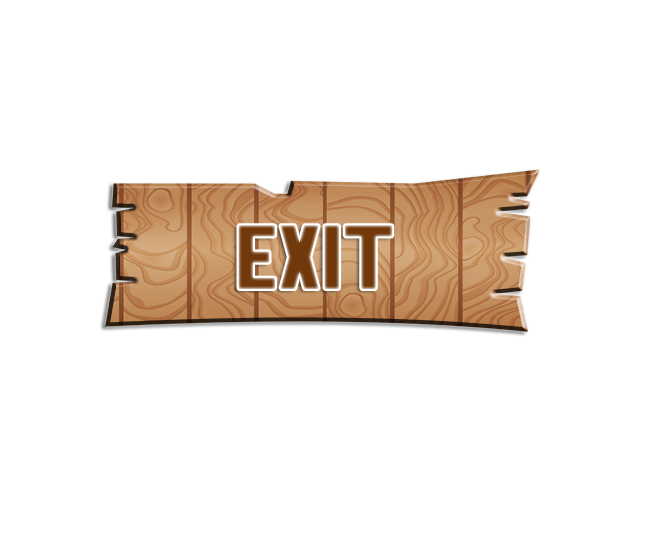
<style>
.page{position:relative;width:650px;height:536px;background:#ffffff}
.page>*{position:absolute;margin:0}
.t1{font:70px "BrewmasterGothicRound";color:#70380b;scale:1.26 1}
</style>
<div class="page">
<p class="t1" style="left:238px;top:225px;width:155px;height:64px">exit</p>
</div>
